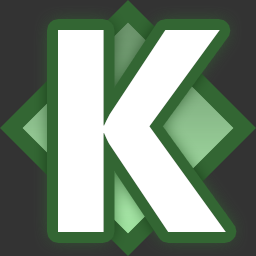
<style>
.page{position:relative;width:256px;height:256px;background:#ffffff}
.page>*{position:absolute;margin:0}
.t1{font:288px "SegoeUI-Bold";color:#ffffff}
</style>
<div class="page">
<p class="t1" style="left:58px;top:30px;width:168px;height:202px">K</p>
</div>
